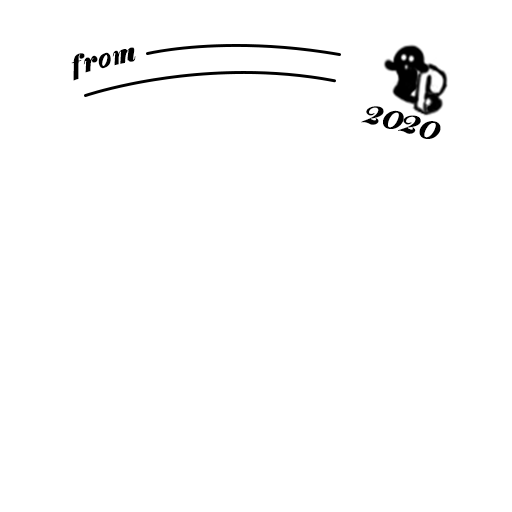
<style>
.page{position:relative;width:512px;height:512px;background:#ffffff}
.page>*{position:absolute;margin:0}
.t1{font:25px "PlayfairDisplay-BlackItalic";letter-spacing:0.04em;color:#000000;scale:0.66 1}
.t2{font:25px "PlayfairDisplay-BlackItalic";letter-spacing:0.1em;color:#000000;scale:0.66 1}
.t3{font:25px "PlayfairDisplay-BlackItalic";letter-spacing:-0.06em;color:#000000;scale:0.66 1}
.t4{font:34.5px "PlayfairDisplay-BlackItalic";letter-spacing:0.04em;color:#000000;scale:0.54 1}
.t5{font:34.5px "PlayfairDisplay-BlackItalic";color:#000000;scale:0.54 1}
</style>
<div class="page">
<p class="t1" style="left:71px;top:47px;width:65px;height:34px;rotate:-14deg">f<span class="t2">r</span><span class="t3">o</span>m</p>
<p class="t4" style="left:361px;top:106px;width:80px;height:33px;rotate:15deg">2<span class="t5">0</span>20</p>
</div>
